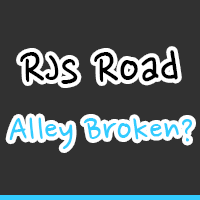
<style>
.page{position:relative;width:200px;height:200px;background:#313131}
.page>*{position:absolute;margin:0}
.t1{font:54px "NanumPen";color:#000000}
.t2{font:40px "NanumPen";color:#33ccff}
</style>
<div class="page">
<p class="t1" style="left:20px;top:50px;width:158px;height:34px">RJs Road</p>
<p class="t2" style="left:9px;top:117px;width:183px;height:32px">Alley Broken?</p>
</div>
